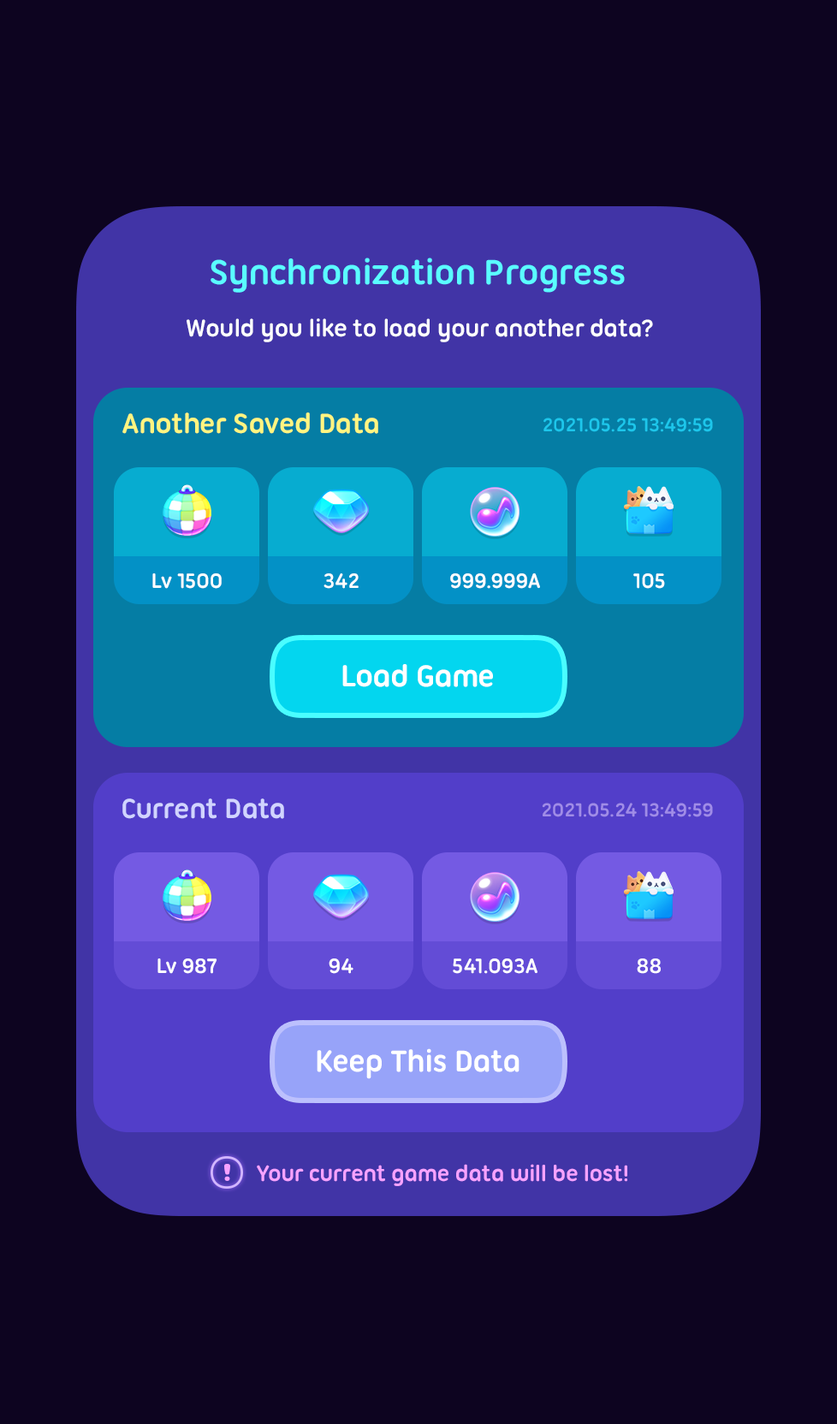
<style>
.page{position:relative;width:837px;height:1424px;background:#0d0420}
.page>*{position:absolute;margin:0}
.t1{font:37.7px "UbuntuTitling-Bold";letter-spacing:-0.025em;color:#5afdff}
.t2{font:25.7px "UbuntuTitling-Bold";letter-spacing:-0.025em;color:#ffffff}
.t3{font:30px "UbuntuTitling-Bold";letter-spacing:-0.025em;color:#fff580}
.t4{font:20.5px "UbuntuTitling-Bold";letter-spacing:-0.025em;color:#1dc6eb}
.t5{font:22.3px "UbuntuTitling-Bold";letter-spacing:-0.025em;color:#ffffff}
.t6{font:32.5px "UbuntuTitling-Bold";letter-spacing:-0.025em;color:#ffffff}
.t7{font:30px "UbuntuTitling-Bold";letter-spacing:-0.025em;color:#d1d4ff}
.t8{font:20.5px "UbuntuTitling-Bold";letter-spacing:-0.025em;color:#a08ce7}
.t9{font:24px "UbuntuTitling-Bold";letter-spacing:-0.025em;color:#f7a2ff}
</style>
<div class="page">
<p class="t1" style="left:211px;top:258px;width:414px;height:35px">Synchronization Progress</p>
<p class="t2" style="left:187px;top:318px;width:466px;height:24px">Would you like to load your another data?</p>
<p class="t3" style="left:122px;top:413px;width:256px;height:21px">Another Saved Data</p>
<p class="t4" style="left:544px;top:418px;width:169px;height:14px">2021.05.25 13:49:59</p>
<p class="t5" style="left:152px;top:574px;width:70px;height:15px">Lv 1500</p>
<p class="t5" style="left:324px;top:574px;width:35px;height:15px">342</p>
<p class="t5" style="left:450px;top:574px;width:90px;height:15px">999.999A</p>
<p class="t5" style="left:633px;top:574px;width:32px;height:15px">105</p>
<p class="t6" style="left:342px;top:664px;width:151px;height:23px">Load Game</p>
<p class="t7" style="left:122px;top:799px;width:162px;height:20px">Current Data</p>
<p class="t8" style="left:542px;top:803px;width:171px;height:14px">2021.05.24 13:49:59</p>
<p class="t5" style="left:158px;top:959px;width:59px;height:15px">Lv 987</p>
<p class="t5" style="left:329px;top:959px;width:25px;height:15px">94</p>
<p class="t5" style="left:453px;top:959px;width:85px;height:15px">541.093A</p>
<p class="t5" style="left:637px;top:959px;width:24px;height:15px">88</p>
<p class="t6" style="left:317px;top:1049px;width:203px;height:30px">Keep This Data</p>
<p class="t9" style="left:257px;top:1164px;width:370px;height:22px">Your current game data will be lost!</p>
</div>
